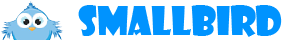
<style>
.page{position:relative;width:300px;height:40px;background:#ffffff}
.page>*{position:absolute;margin:0}
.t1{font:37.5px "ShowcardGothic-Reg";color:#0093fe}
</style>
<div class="page">
<p class="t1" style="left:78px;top:5px;width:204px;height:32px">SmallBird</p>
</div>
